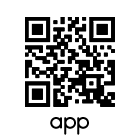
<style>
.page{position:relative;width:140px;height:140px;background:#ffffff}
.page>*{position:absolute;margin:0}
.t1{font:24px "Nova";color:#000000}
</style>
<div class="page">
<p class="t1" style="left:50px;top:117px;width:39px;height:18px">app</p>
</div>
